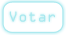
<style>
.page{position:relative;width:66px;height:35px;background:#ffffff}
.page>*{position:absolute;margin:0}
.t1{font:13.3px "OCRAStd";color:#a8e8ee}
</style>
<div class="page">
<p class="t1" style="left:9px;top:11px;width:46px;height:11px">Votar</p>
</div>
